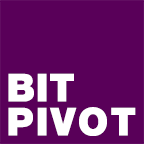
<style>
.page{position:relative;width:144px;height:144px;background:#590059}
.page>*{position:absolute;margin:0}
.t1{font:38.5px "HelveticaNeueLTStd-Blk";letter-spacing:0.017em;color:#ffffff}
.t2{font:38.5px "HelveticaNeueLTStd-Blk";letter-spacing:0.055em;color:#ffffff}
</style>
<div class="page">
<p class="t1" style="left:8px;top:73px;width:66px;height:29px">BIT</p>
<p class="t2" style="left:8px;top:107px;width:128px;height:29px">PIVOT</p>
</div>
